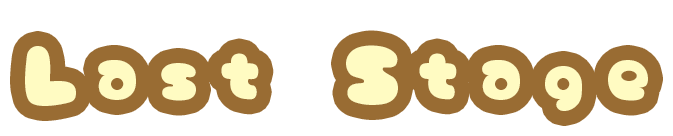
<style>
.page{position:relative;width:673px;height:136px;background:#ffffff}
.page>*{position:absolute;margin:0}
.t1{font:82.9px "AmeChanPopMaruLight-Regular";letter-spacing:0.2em;color:#fffbc2}
</style>
<div class="page">
<p class="t1" style="left:25px;top:45px;width:623px;height:66px">Last Stage</p>
</div>
